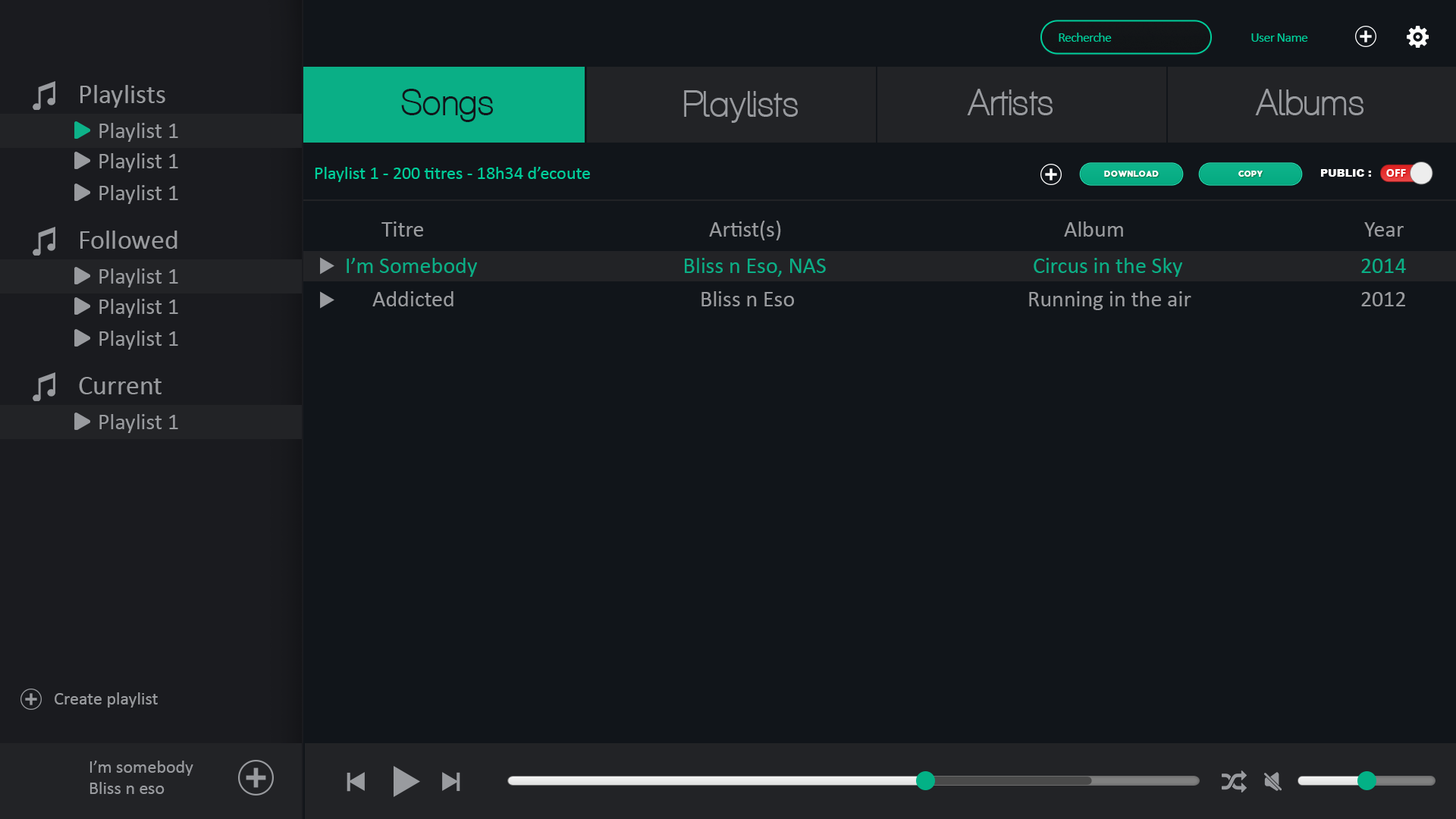
<style>
.page{position:relative;width:1456px;height:819px;background:#11151a}
.page>*{position:absolute;margin:0}
.t1{font:13.6px "Calibri";letter-spacing:-0.04em;color:#00ce9b}
.t2{font:27.3px "Calibri";color:#999b9f}
.t3{font:36.4px "Aliquam";letter-spacing:0.01em;color:#11151a}
.t4{font:36.4px "Aliquam";letter-spacing:0.01em;color:#999b9f}
.t5{font:22.7px "Calibri";color:#999b9f}
.t6{font:18.2px "Calibri";color:#00ce9b}
.t7{font:7.5px "PRIMETIME-Regular";letter-spacing:0.025em;color:#ffffff;text-transform:uppercase}
.t8{font:10.6px "Arial-Black";color:#ffffff}
.t9{font:10.6px "OpenSans-Bold";color:#ffffff}
.t10{font:22.7px "Calibri";color:#0aaf86}
.t11{font:18.2px "Calibri";color:#999b9f}
</style>
<div class="page">
<p class="t1" style="left:1059px;top:33px;width:53px;height:9px">Recherche</p>
<p class="t1" style="left:1251px;top:33px;width:57px;height:9px">User Name</p>
<p class="t2" style="left:80px;top:85px;width:85px;height:23px">Playlists</p>
<p class="t3" style="left:401px;top:89px;width:92px;height:33px">Songs</p>
<p class="t4" style="left:967px;top:89px;width:86px;height:26px">Artists</p>
<p class="t4" style="left:1255px;top:89px;width:108px;height:26px">Albums</p>
<p class="t4" style="left:684px;top:90px;width:114px;height:33px">Playlists</p>
<p class="t5" style="left:99px;top:123px;width:79px;height:19px">Playlist 1</p>
<p class="t5" style="left:99px;top:153px;width:79px;height:19px">Playlist 1</p>
<p class="t6" style="left:315px;top:167px;width:275px;height:15px">Playlist 1 - 200 titres - 18h34 d’ecoute</p>
<p class="t7" style="left:1104px;top:171px;width:55px;height:6px">Download</p>
<p class="t7" style="left:1238px;top:171px;width:25px;height:6px">Copy</p>
<p class="t8" style="left:1321px;top:169px;width:50px;height:8px">: PUBLIC</p>
<p class="t9" style="left:1386px;top:169px;width:20px;height:8px">OFF</p>
<p class="t5" style="left:99px;top:185px;width:79px;height:19px">Playlist 1</p>
<p class="t5" style="left:381px;top:221px;width:1023px;height:19px">Titre           Artist(s)           Album          Year</p>
<p class="t2" style="left:80px;top:231px;width:97px;height:18px">Followed</p>
<p class="t10" style="left:347px;top:258px;width:1059px;height:19px">I’m Somebody          Bliss n Eso, NAS         Circus in the Sky        2014</p>
<p class="t5" style="left:99px;top:268px;width:79px;height:19px">Playlist 1</p>
<p class="t5" style="left:372px;top:291px;width:1033px;height:19px">Addicted           Bliss n Eso          Running in the air        2012</p>
<p class="t5" style="left:99px;top:299px;width:79px;height:19px">Playlist 1</p>
<p class="t5" style="left:99px;top:331px;width:79px;height:19px">Playlist 1</p>
<p class="t2" style="left:79px;top:377px;width:83px;height:17px">Current</p>
<p class="t5" style="left:99px;top:414px;width:79px;height:19px">Playlist 1</p>
<p class="t11" style="left:55px;top:692px;width:103px;height:16px">Create playlist</p>
<p class="t11" style="left:89px;top:761px;width:104px;height:33px;text-align:right">I’m somebody<br>Bliss n eso</p>
</div>
